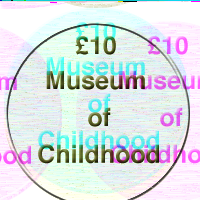
<style>
.page{position:relative;width:200px;height:200px}
.page>*{position:absolute;margin:0}
.t1{font:25px "Helvetica-Bold"}
.t2{font:25px/36.9px "Helvetica-Bold"}
</style>
<div class="page">
<p class="t1" style="left:75px;top:21px;width:41px;height:19px">£10</p>
<p class="t2" style="left:38px;top:56px;width:121px;height:93px;text-align:center">Museum <br>of<br>Childhood</p>
</div>
